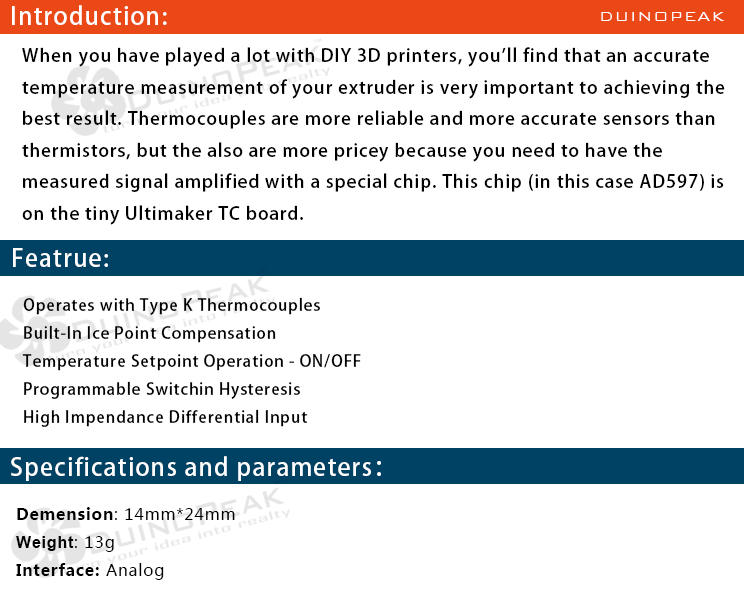
<style>
.page{position:relative;width:744px;height:605px;background:#ffffff}
.page>*{position:absolute;margin:0}
.t1{font:24px "AdobeHeitiStd-Regular";letter-spacing:0.05em;color:#ffffff}
.t2{font:18px "BankGothicBT-Light";letter-spacing:0.05em;color:#ffffff}
.t3{font:18px "AdobeHeitiStd-Regular";letter-spacing:0.05em;color:#000000}
.t4{font:16px "AdobeHeitiStd-Regular";letter-spacing:0.05em;color:#000000}
.t5{font:16px "MicrosoftYaHei";letter-spacing:0.05em;color:#000000}
.t6{font:16px "MicrosoftYaHei-Bold";letter-spacing:0.05em;color:#000000}
.t7{font:16px "Arial-BoldMT";letter-spacing:0.05em;color:#000000}
</style>
<div class="page">
<p class="t1" style="left:12px;top:5px;width:155px;height:20px">Introduction:</p>
<p class="t2" style="left:601px;top:12px;width:124px;height:9px">DUINOPEAK</p>
<p class="t3" style="left:22px;top:47px;width:703px;height:178px">When you have played a lot with DIY 3D printers, you'll find that an accurate <br>temperature measurement of your extruder is very important to achieving the <br>best result. Thermocouples are more reliable and more accurate sensors than <br>thermistors, but the also are more pricey because you need to have the <br>measured signal amplified with a special chip. This chip (in this case AD597) is <br>on the tiny Ultimaker TC board.</p>
<p class="t1" style="left:13px;top:248px;width:95px;height:19px">Featrue:</p>
<p class="t4" style="left:22px;top:297px;width:339px;height:130px">Operates with Type K Thermocouples<br>Built-In Ice Point Compensation<br>Temperature Setpoint Operation - ON/OFF<br>Programmable Switchin Hysteresis<br>High Impendance Differential Input</p>
<p class="t1" style="left:11px;top:456px;width:370px;height:25px">Specifications and parameters：</p>
<p class="t5" style="left:16px;top:507px;width:219px;height:73px"><span class="t6">Demension</span>: 14mm*24mm<br><span class="t7">Weight</span>: 13g<br><span class="t6">Interface: </span>Analog</p>
</div>
